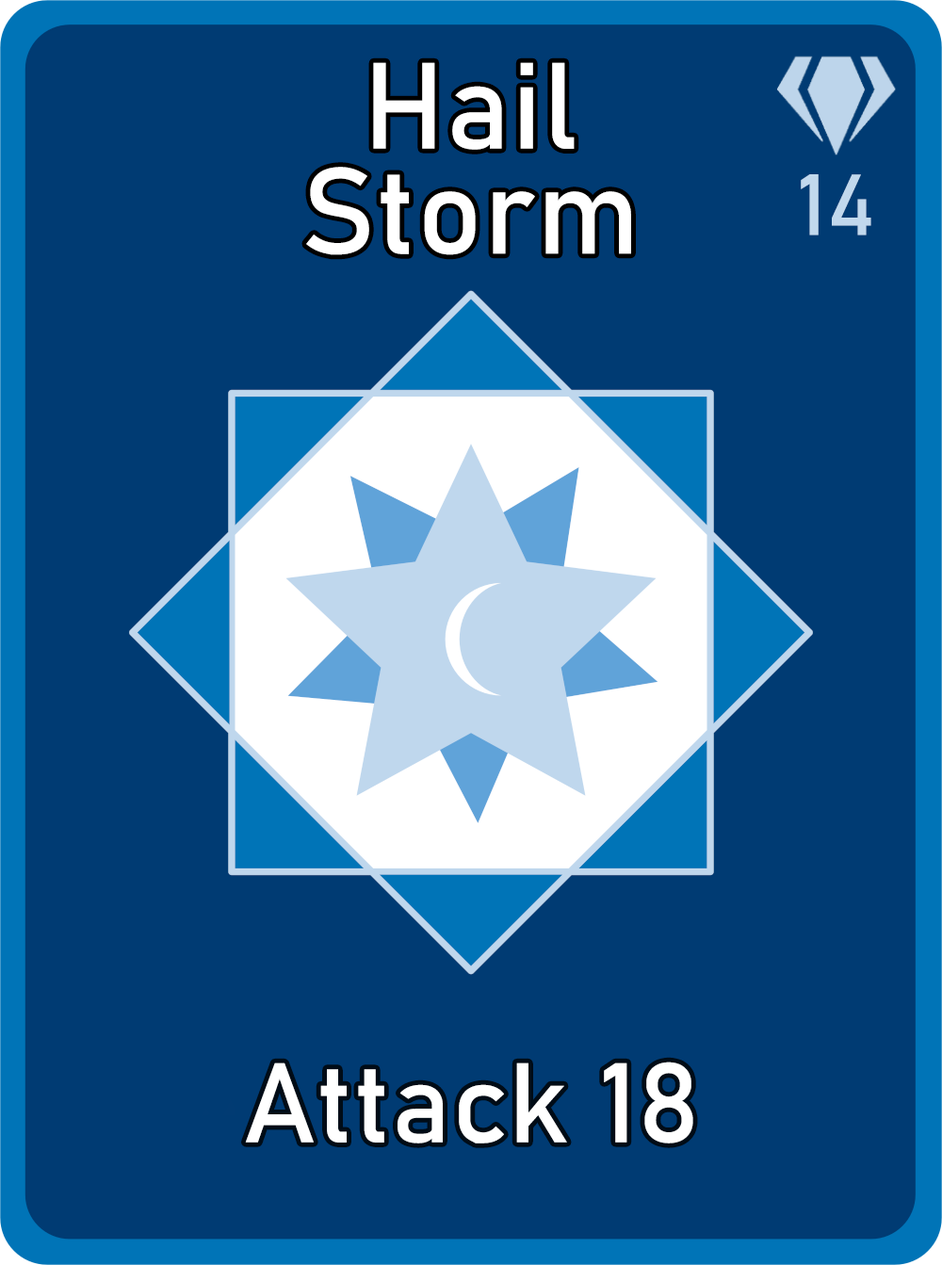
<style>
.page{position:relative;width:942px;height:1265px;background:#003b73}
.page>*{position:absolute;margin:0}
.t1{font:120.6px/105.1px "Bahnschrift";letter-spacing:0.01em;color:#ffffff}
.t2{font:85px "Bahnschrift";letter-spacing:0.01em;color:#c1d8ed}
.t3{font:111.3px "Bahnschrift";letter-spacing:0.01em;color:#ffffff}
</style>
<div class="page">
<p class="t1" style="left:306px;top:62px;width:325px;height:193px;text-align:center">Hail<br>Storm</p>
<p class="t2" style="left:801px;top:174px;width:71px;height:62px">14</p>
<p class="t3" style="left:245px;top:1062px;width:449px;height:82px">Attack 18</p>
</div>
